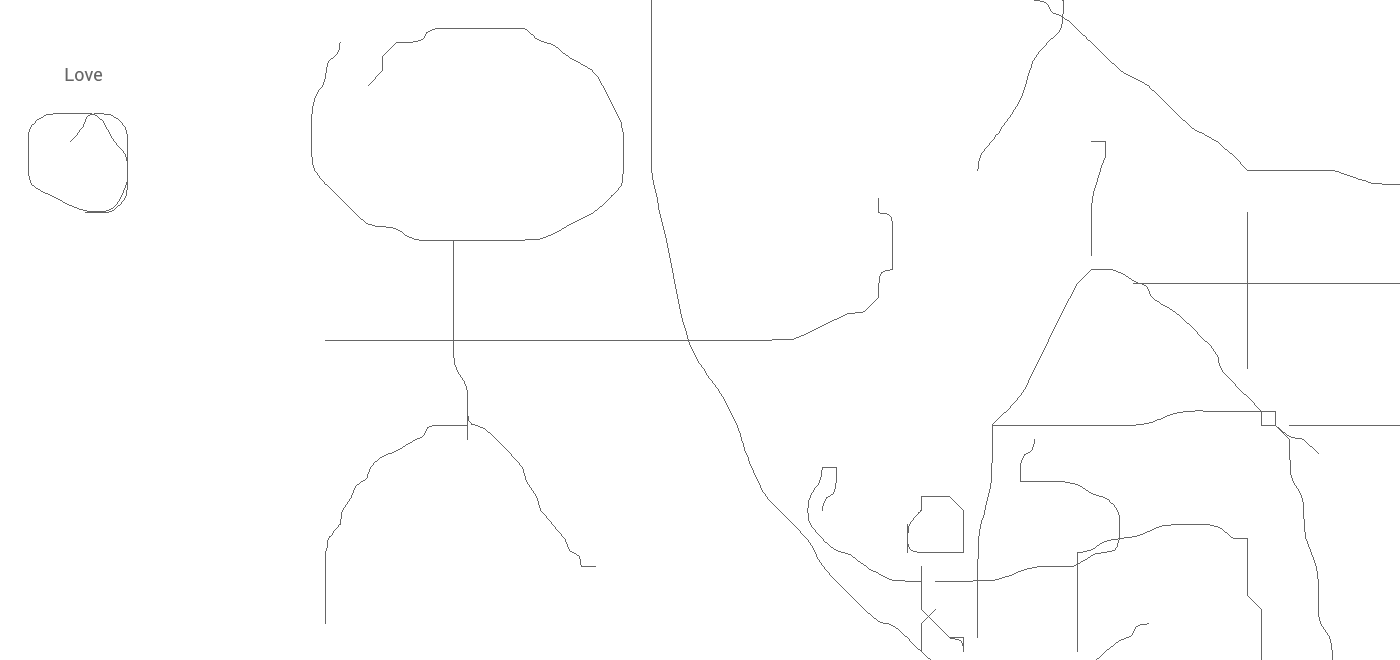
<style>
.page{position:relative;width:1400px;height:660px;background:#ffffff}
.page>*{position:absolute;margin:0}
.t1{font:18px "Roboto-Regular";color:#666666}
</style>
<div class="page">
<p class="t1" style="left:65px;top:68px;width:38px;height:13px">Love</p>
</div>
